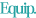
<style>
.page{position:relative;width:36px;height:18px;background:#ffffff}
.page>*{position:absolute;margin:0}
.t1{font:16px "HeiseiMinStd-W7";letter-spacing:-0.09em;color:#25a2a2}
</style>
<div class="page">
<p class="t1" style="left:0px;top:2px;width:36px;height:16px">Equip.</p>
</div>
